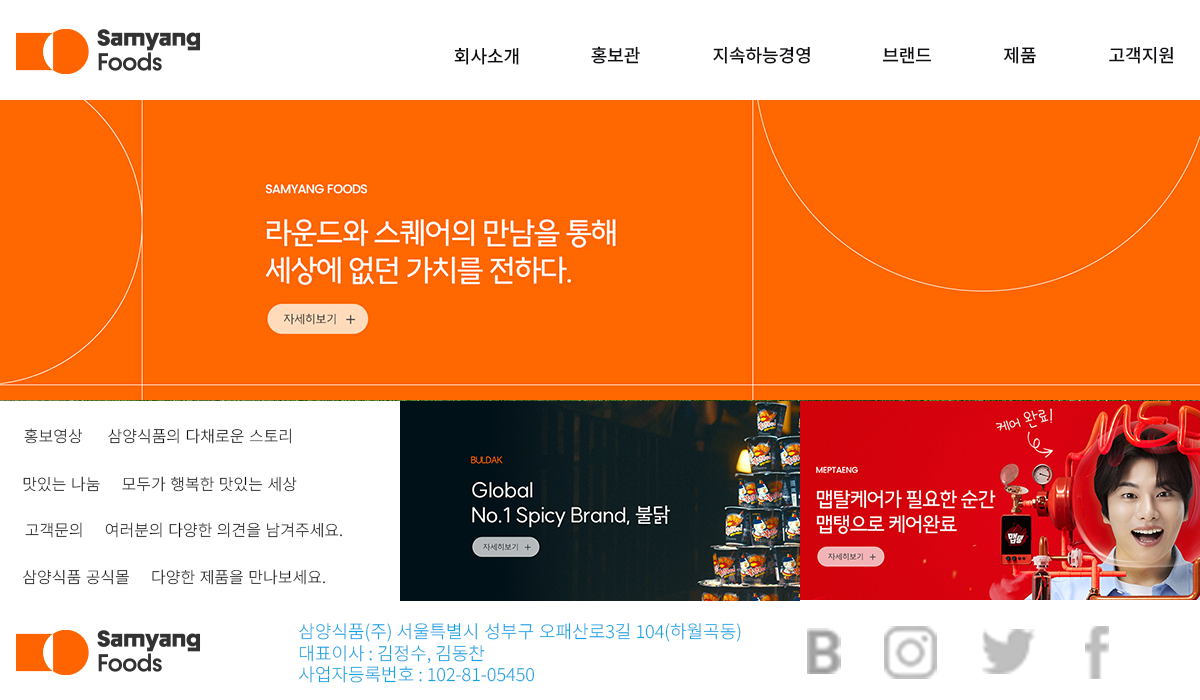
<style>
.page{position:relative;width:1200px;height:700px;background:#ff6801}
.page>*{position:absolute;margin:0}
.t1{font:18px "NotoSansKR-Medium";color:#0d0d12}
.t2{font:16px "NotoSansKR-Light";color:#0d0d12}
.t3{font:18px "NotoSansKR-Light";color:#10a4e3}
</style>
<div class="page">
<p class="t1" style="left:454px;top:47px;width:65px;height:18px">회사소개</p>
<p class="t1" style="left:591px;top:46px;width:49px;height:18px">홍보관</p>
<p class="t1" style="left:713px;top:46px;width:97px;height:18px">지속하능경영</p>
<p class="t1" style="left:882px;top:46px;width:50px;height:18px">브랜드</p>
<p class="t1" style="left:1003px;top:46px;width:33px;height:18px">제품</p>
<p class="t1" style="left:1109px;top:46px;width:65px;height:18px">고객지원</p>
<p class="t2" style="left:24px;top:428px;width:267px;height:16px">홍보영상       삼양식품의 다채로운 스토리</p>
<p class="t2" style="left:23px;top:476px;width:274px;height:16px">맛있는 나눔      모두가 행복한 맛있는 세상</p>
<p class="t2" style="left:25px;top:522px;width:317px;height:16px">고객문의      여러분의 다양한 의견을 남겨주세요.</p>
<p class="t2" style="left:23px;top:569px;width:302px;height:16px">삼양식품 공식몰      다양한 제품을 만나보세요.</p>
<p class="t3" style="left:299px;top:623px;width:442px;height:60px">삼양식품(주) 서울특별시 성부구 오패산로3길 104(하월곡동)<br>대표이사 : 김정수, 김동찬<br>사업자등록번호 : 102-81-05450</p>
</div>
